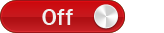
<style>
.page{position:relative;width:164px;height:33px;background:#ffffff}
.page>*{position:absolute;margin:0}
.t1{font:24px "FranklinGothic-Medium";color:#efefef}
.t2{font:24px "FranklinGothic-Medium"}
</style>
<div class="page">
<p class="t1" style="left:42px;top:9px;width:31px;height:16px">Off</p>
<p class="t2" style="left:43px;top:9px;width:27px;height:16px">On</p>
</div>
